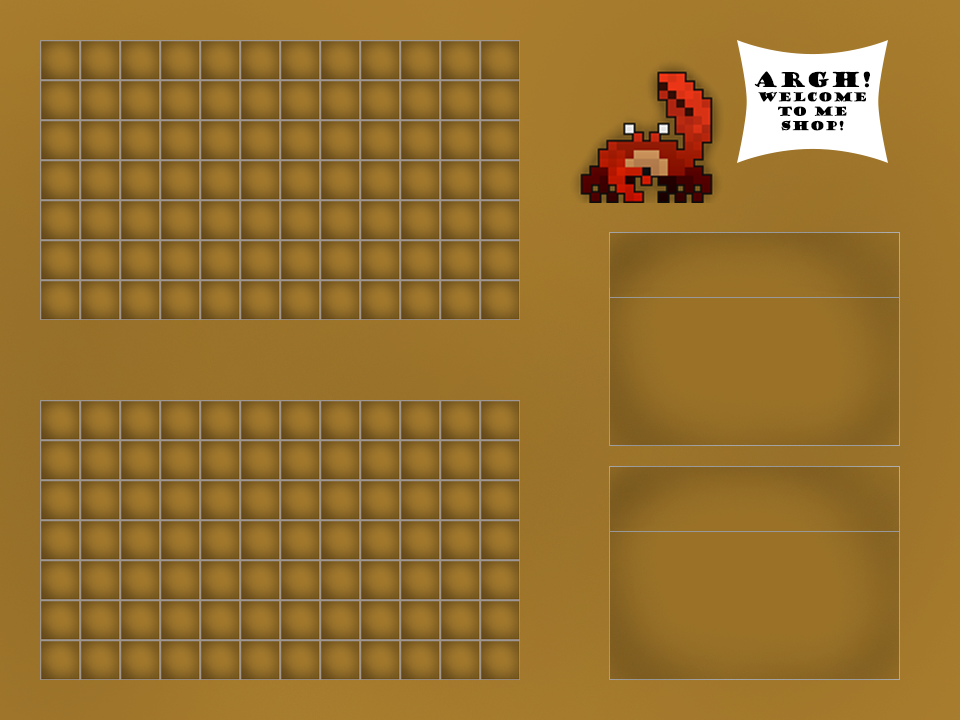
<style>
.page{position:relative;width:960px;height:720px}
.page>*{position:absolute;margin:0}
.t1{font:12px "GoudyStout";color:#000000}
.t2{font:20px "GoudyStout";color:#000000}
</style>
<div class="page">
<p class="t1" style="left:754px;top:71px;width:116px;height:60px;text-align:center"><span class="t2">ARGH!<br></span>Welcome<br>to me<br>shop!</p>
</div>
